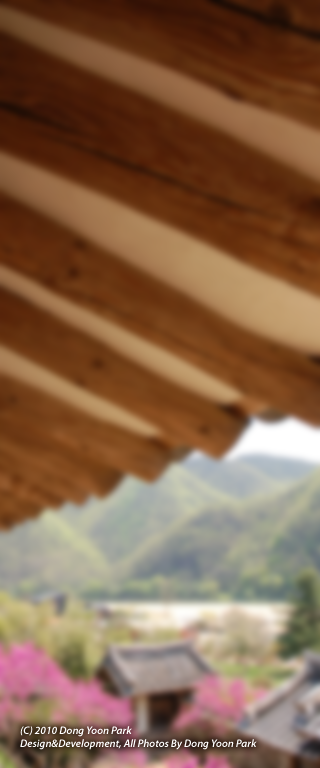
<style>
.page{position:relative;width:320px;height:768px}
.page>*{position:absolute;margin:0}
.t1{font:10.8px "MyriadPro-SemiboldIt";color:#ffffff}
</style>
<div class="page">
<p class="t1" style="left:20px;top:726px;width:237px;height:24px">(C) 2010 Dong Yoon Park<br>Design&amp;Development, All Photos By Dong Yoon Park</p>
</div>
